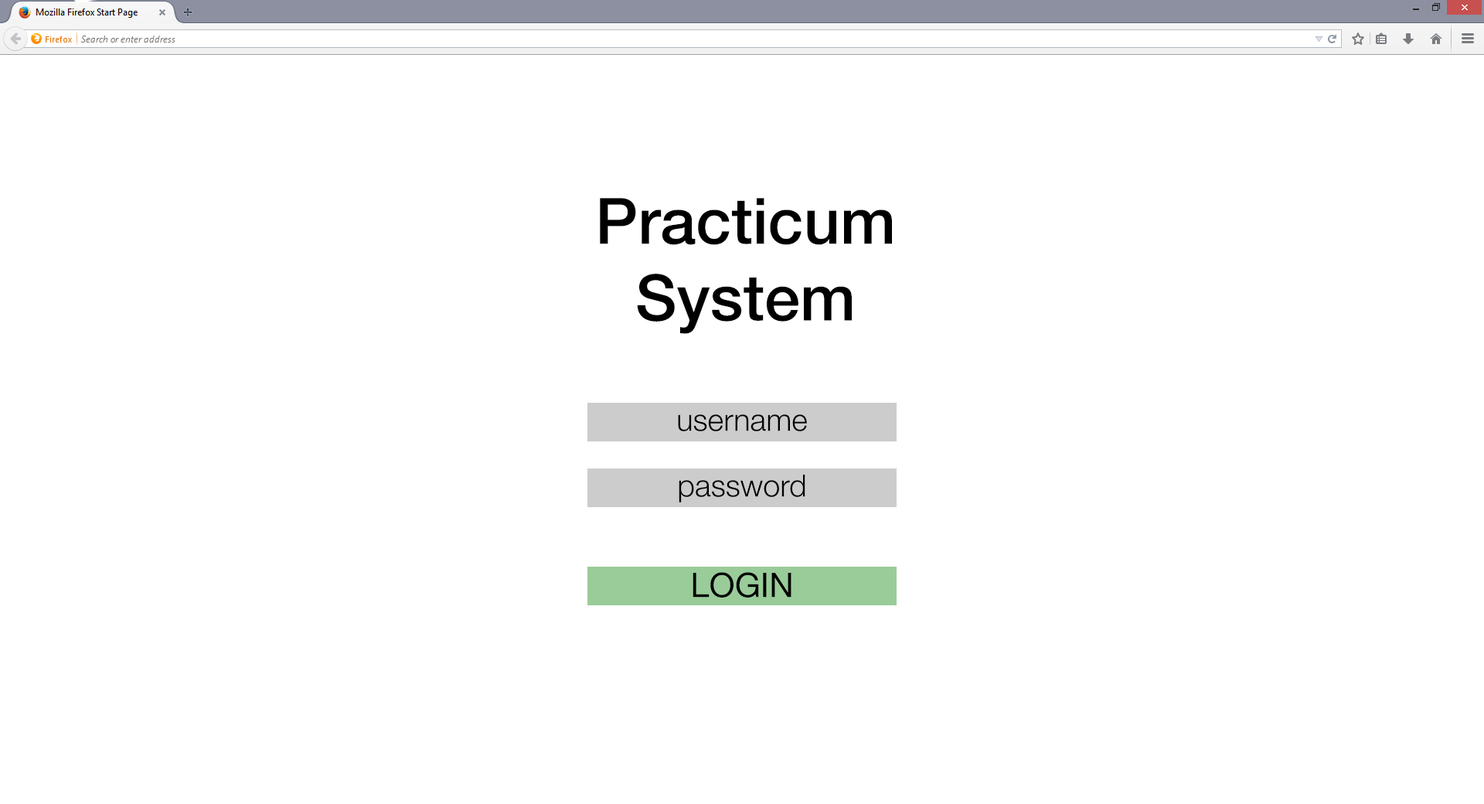
<style>
.page{position:relative;width:1484px;height:804px;background:#ffffff}
.page>*{position:absolute;margin:0}
.t1{font:63.9px "HelveticaNeue-Medium";color:#000000}
.t2{font:30.6px "HelveticaNeue-Light";color:#000000}
.t3{font:33.7px "HelveticaNeue";color:#000000}
</style>
<div class="page">
<p class="t1" style="left:600px;top:198px;width:292px;height:136px;text-align:center">Practicum<br>System</p>
<p class="t2" style="left:678px;top:414px;width:129px;height:17px">username</p>
<p class="t2" style="left:678px;top:474px;width:127px;height:28px">password</p>
<p class="t3" style="left:692px;top:572px;width:99px;height:25px">LOGIN</p>
</div>
